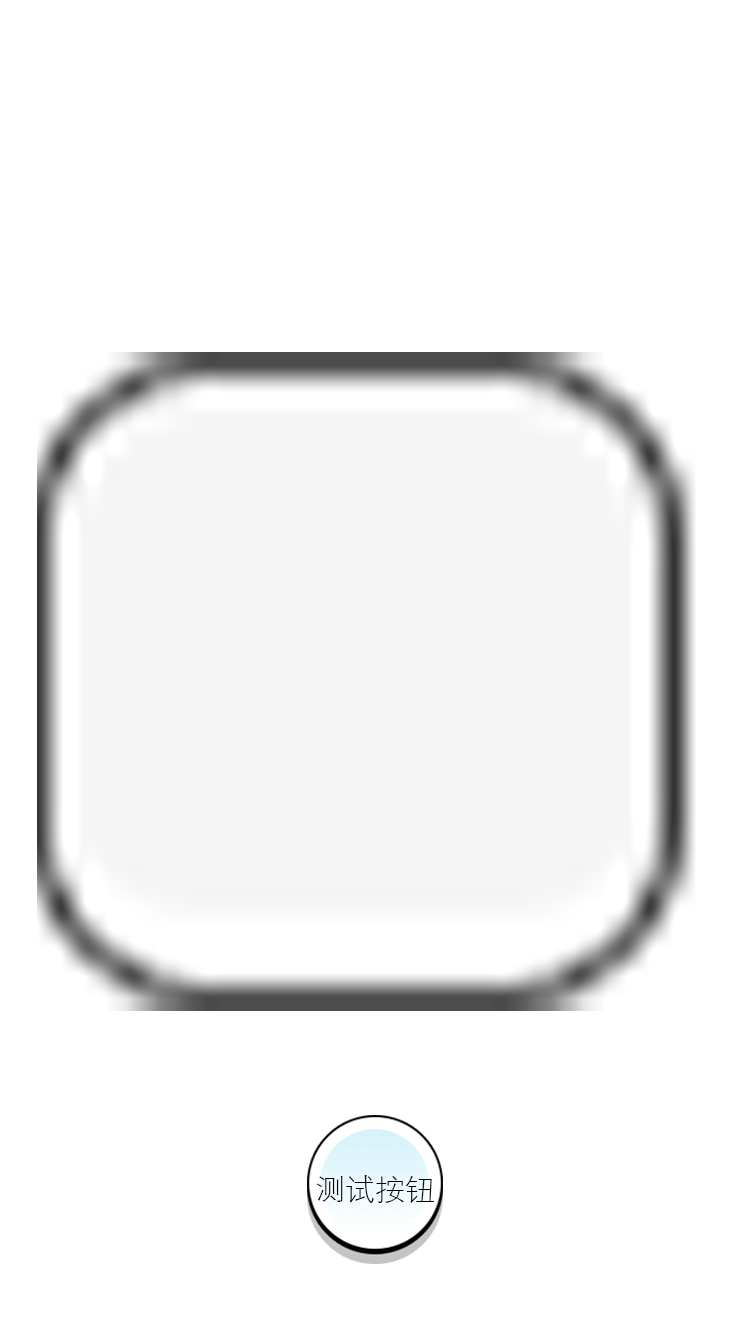
<style>
.page{position:relative;width:750px;height:1334px;background:#ffffff}
.page>*{position:absolute;margin:0}
.t1{font:30px "DengXian-Light";color:#000000}
</style>
<div class="page">
<p class="t1" style="left:316px;top:1175px;width:118px;height:28px">测试按钮</p>
</div>
